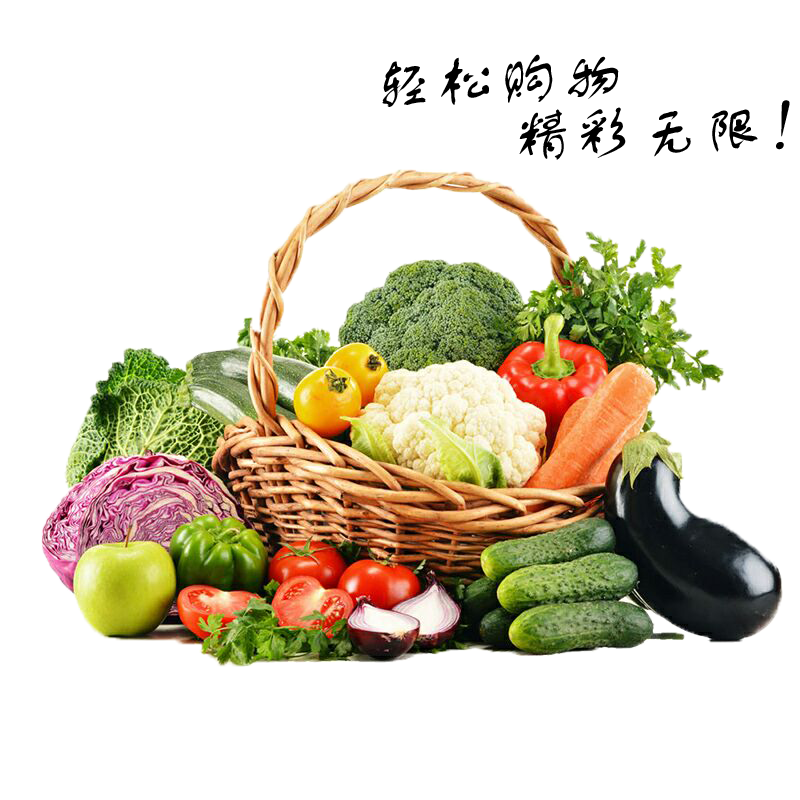
<style>
.page{position:relative;width:800px;height:800px;background:#ffffff}
.page>*{position:absolute;margin:0}
.t1{font:60px "FZSTK--GBK1-0";letter-spacing:0.05em;color:#000000}
.t2{font:60px "FZSTK--GBK1-0";letter-spacing:0.05em;color:#000000;font-style:italic}
</style>
<div class="page">
<p class="t1" style="left:382px;top:54px;width:237px;height:53px;rotate:-2deg">轻松购物</p>
<p class="t1" style="left:519px;top:100px;width:271px;height:60px;rotate:-2deg">精彩无限<span class="t2">！</span></p>
</div>
